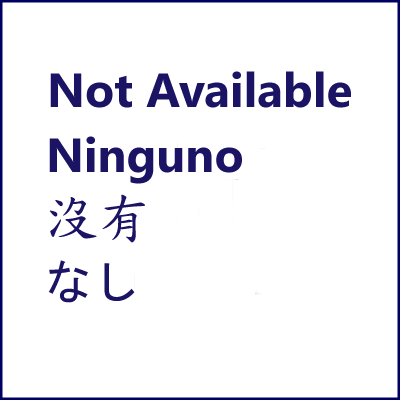
<style>
.page{position:relative;width:400px;height:400px;background:#ffffff}
.page>*{position:absolute;margin:0}
.t1{font:48px "SegoeUI-Bold";color:#1b1464}
.t2{font:54px "DFKaiShu-SB-Estd-BF";color:#1b1464}
.t3{font:48px "MS-Gothic";color:#1b1464}
</style>
<div class="page">
<p class="t1" style="left:50px;top:71px;width:301px;height:37px">Not Available</p>
<p class="t1" style="left:49px;top:136px;width:193px;height:48px">Ninguno</p>
<p class="t2" style="left:49px;top:194px;width:96px;height:49px">沒有</p>
<p class="t3" style="left:48px;top:260px;width:87px;height:43px">なし</p>
</div>
